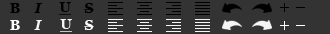
<style>
.page{position:relative;width:330px;height:34px;background:#333333}
.page>*{position:absolute;margin:0}
.t1{font:14px "Georgia-Bold";color:#000000}
.t2{font:14px "Georgia-BoldItalic";color:#000000}
.t3{font:14px "Georgia-Bold";color:#000000;text-decoration:underline}
.t4{font:14px "Georgia-Bold";color:#ffffff}
.t5{font:14px "Georgia-BoldItalic";color:#ffffff}
.t6{font:14px "Georgia-Bold";color:#ffffff;text-decoration:underline}
</style>
<div class="page">
<p class="t1" style="left:10px;top:3px;width:10px;height:10px">B</p>
<p class="t2" style="left:34px;top:3px;width:8px;height:10px">I</p>
<p class="t3" style="left:59px;top:2px;width:12px;height:13px">U</p>
<p class="t1" style="left:84px;top:3px;width:10px;height:10px">S</p>
<p class="t4" style="left:10px;top:20px;width:10px;height:10px">B</p>
<p class="t5" style="left:34px;top:20px;width:8px;height:10px">I</p>
<p class="t6" style="left:60px;top:19px;width:12px;height:13px">U</p>
<p class="t4" style="left:84px;top:20px;width:10px;height:10px">S</p>
</div>
